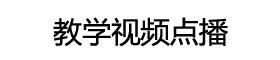
<style>
.page{position:relative;width:280px;height:60px;background:#ffffff}
.page>*{position:absolute;margin:0}
.t1{font:29.2px "MicrosoftYaHeiUI";color:#010101}
</style>
<div class="page">
<p class="t1" style="left:53px;top:17px;width:175px;height:30px">教学视频点播</p>
</div>
